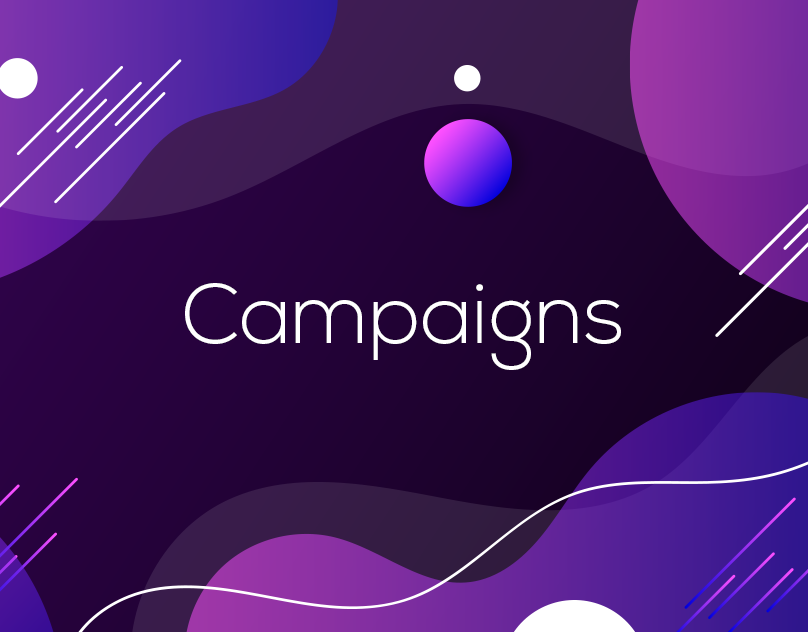
<style>
.page{position:relative;width:808px;height:632px}
.page>*{position:absolute;margin:0}
.t1{font:84.6px "NexaLight";color:#ffffff}
</style>
<div class="page">
<p class="t1" style="left:185px;top:283px;width:436px;height:87px">Campaigns</p>
</div>
